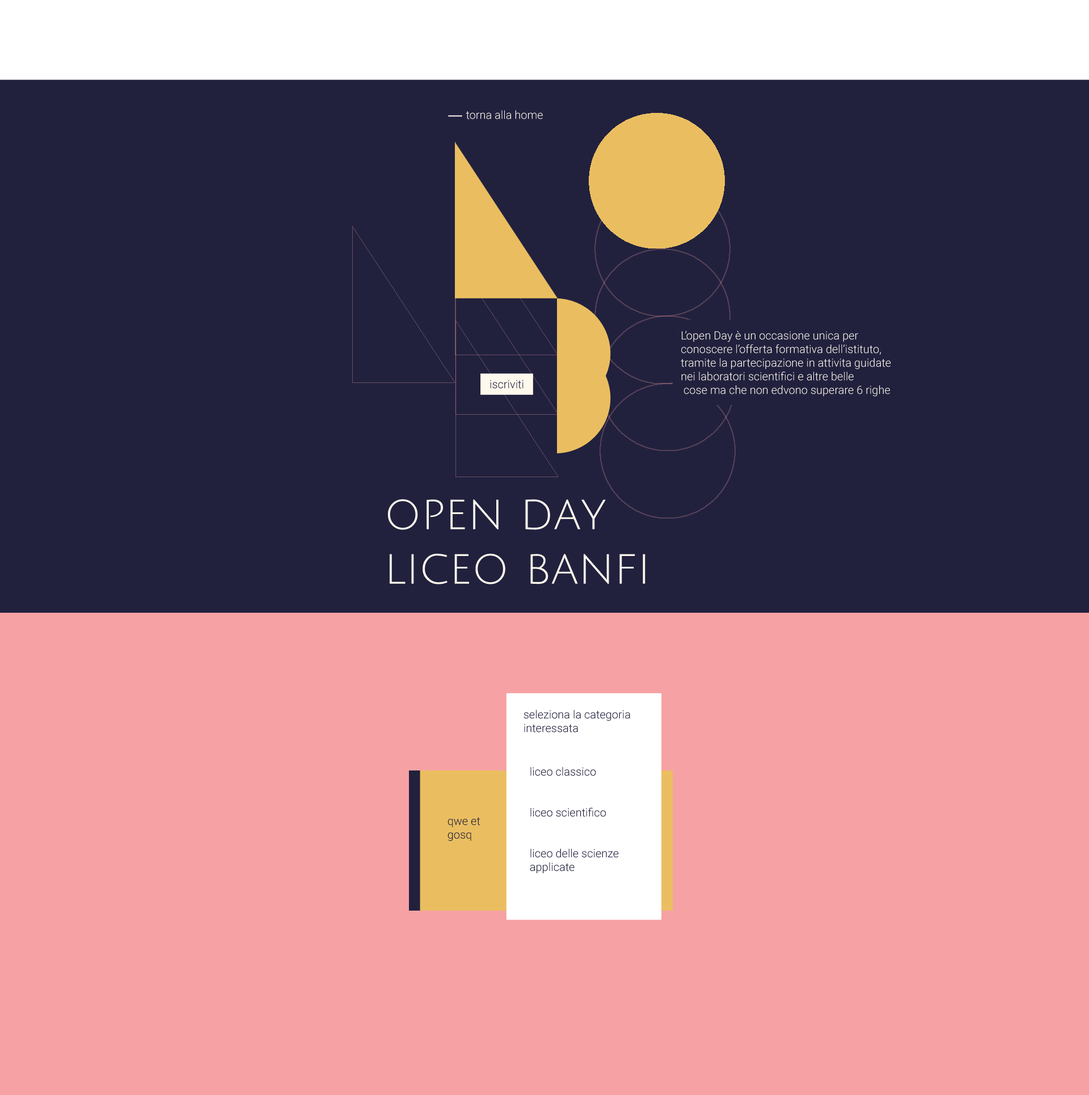
<style>
.page{position:relative;width:1089px;height:1095px;background:#21213e}
.page>*{position:absolute;margin:0}
.t1{font:11.3px "Roboto-Light";color:#fff9ed}
.t2{font:11.3px "Roboto-Light";color:#21213e}
.t3{font:45.4px "JuliusSansOne-Regular";color:#fff9ed}
</style>
<div class="page">
<p class="t1" style="left:466px;top:110px;width:77px;height:9px">torna alla home</p>
<p class="t1" style="left:681px;top:331px;width:210px;height:66px">L’open Day è un occasione unica per<br>conoscere l’offerta formativa dell’istituto,<br>tramite la partecipazione in attivita guidate<br>nei laboratori scientifici e altre belle<br> cose ma che non edvono superare 6 righe</p>
<p class="t2" style="left:490px;top:380px;width:34px;height:9px">iscriviti</p>
<p class="t3" style="left:388px;top:499px;width:258px;height:85px">open day<br>liceo banfi</p>
<p class="t2" style="left:524px;top:710px;width:106px;height:22px">seleziona la categoria<br>interessata</p>
<p class="t2" style="left:530px;top:767px;width:89px;height:106px">liceo classico<br><br><br>liceo scientifico<br><br><br>liceo delle scienze<br>applicate</p>
<p class="t2" style="left:448px;top:817px;width:32px;height:24px">qwe et<br>gosq</p>
</div>
